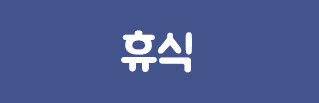
<style>
.page{position:relative;width:319px;height:103px;background:#43548c}
.page>*{position:absolute;margin:0}
.t1{font:48px "BMJUA";color:#ffffff}
</style>
<div class="page">
<p class="t1" style="left:121px;top:30px;width:71px;height:43px">휴식</p>
</div>
